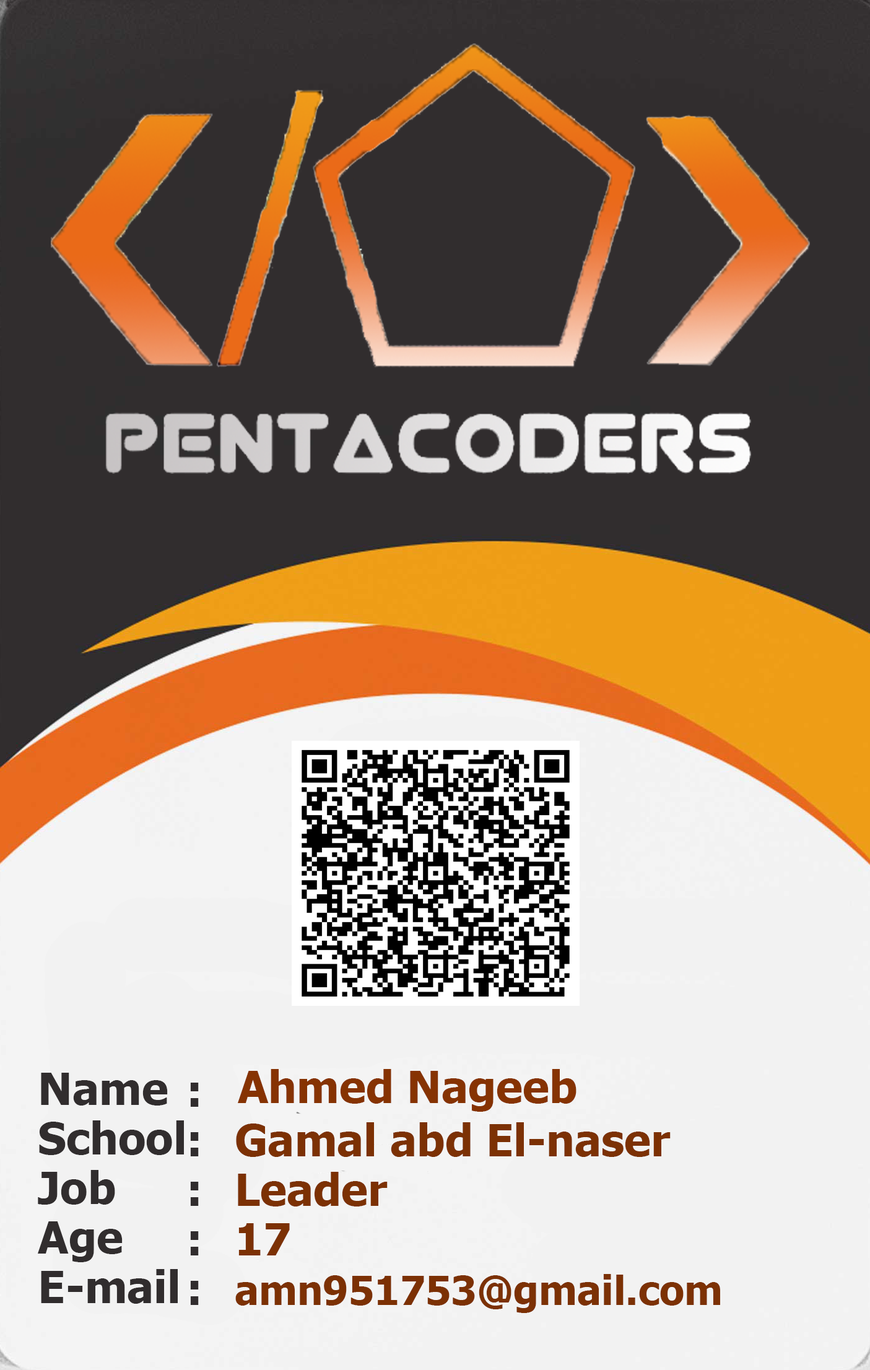
<style>
.page{position:relative;width:870px;height:1370px;background:#312d2e}
.page>*{position:absolute;margin:0}
.t1{font:44.6px/49.6px "Tahoma-Bold";color:#312d2e}
.t2{font:44.6px "Tahoma-Bold";color:#863302}
.t3{font:44.6px/49.6px "Tahoma-Bold";color:#7c3104}
.t4{font:40.3px/49.6px "Tahoma-Bold";color:#7c3104}
</style>
<div class="page">
<p class="t1" style="left:38px;top:1073px;width:146px;height:231px">Name<br>School <br>Job      <br>Age <br>E-mail</p>
<p class="t2" style="left:238px;top:1069px;width:339px;height:43px">Ahmed Nageeb</p>
<p class="t1" style="left:190px;top:1083px;width:9px;height:222px">:<br>:<br>:<br>:<br>:</p>
<p class="t3" style="left:235px;top:1122px;width:485px;height:191px">Gamal abd El-naser<br>Leader<br>17<br><span class="t4">amn951753@gmail.com</span></p>
</div>
